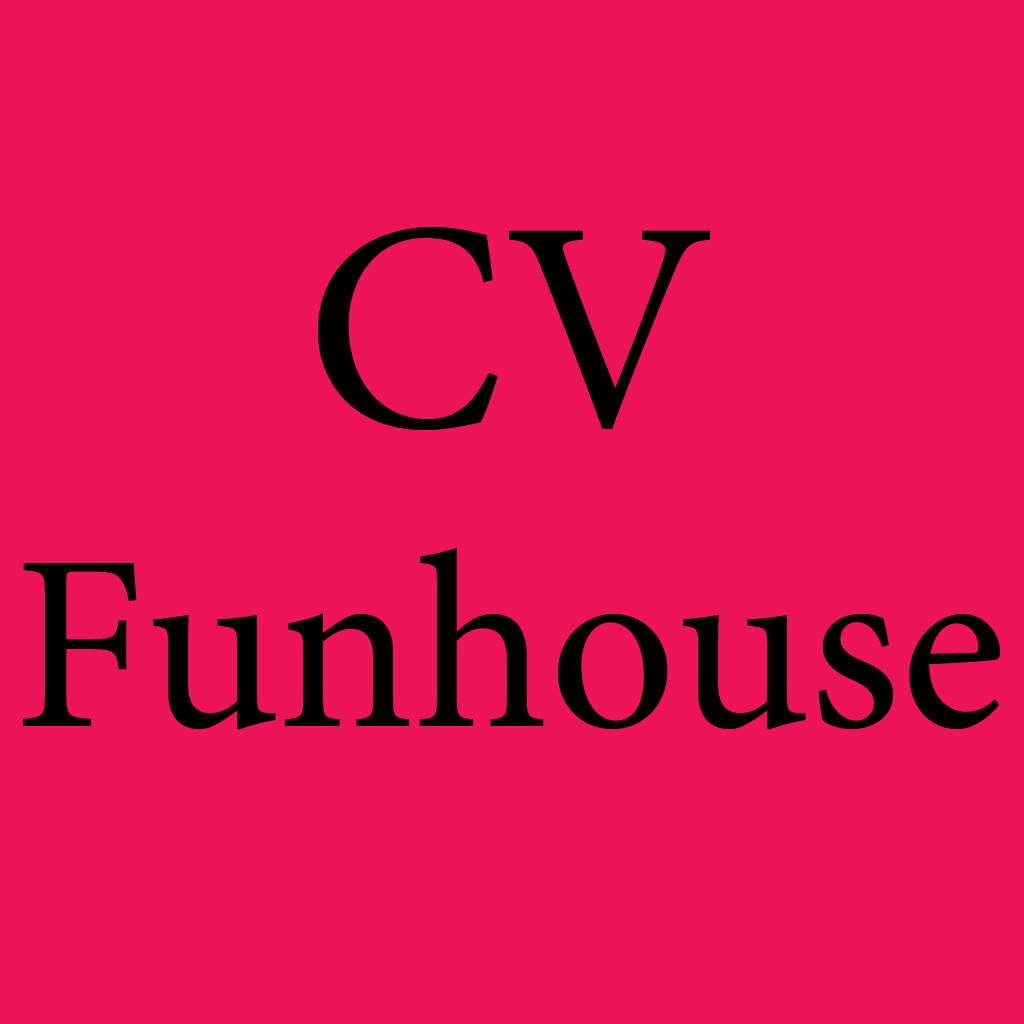
<style>
.page{position:relative;width:1024px;height:1024px;background:#ee145b}
.page>*{position:absolute;margin:0}
.t1{font:250px "MinionPro-Regular";color:#000000}
.t2{font:300px "MinionPro-Regular";color:#000000}
</style>
<div class="page">
<p class="t1" style="left:23px;top:227px;width:977px;height:503px;text-align:center"><span class="t2">CV<br></span>Funhouse</p>
</div>
